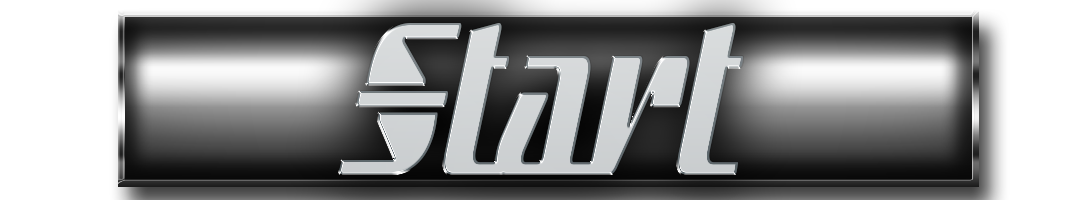
<style>
.page{position:relative;width:1080px;height:200px}
.page>*{position:absolute;margin:0}
.t1{font:200px "Sandoval-Regular";color:#d0d4d5}
</style>
<div class="page">
<p class="t1" style="left:339px;top:23px;width:404px;height:151px">Start</p>
</div>
